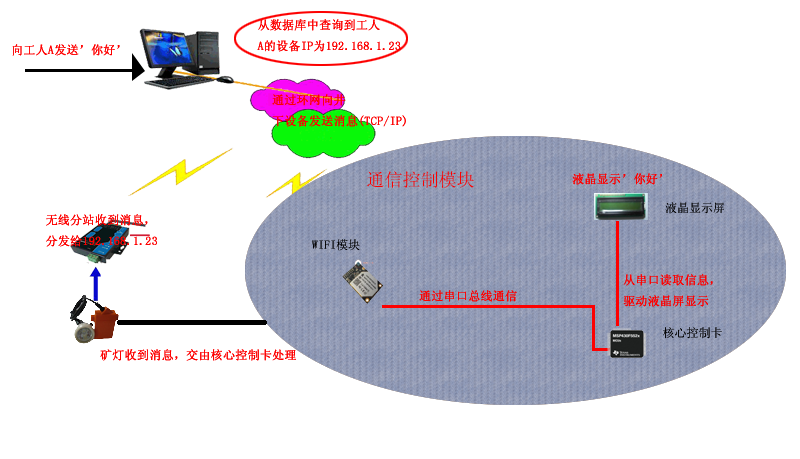
<style>
.page{position:relative;width:800px;height:459px;background:#ffffff}
.page>*{position:absolute;margin:0}
.t1{font:12px "SimSun";color:#fd0101;font-weight:bold}
.t2{font:12px "SimSun";color:#ff0000;font-weight:bold}
.t3{font:18px "SimSun";color:#fc0101}
.t4{font:12px "SimSun";color:#000000}
</style>
<div class="page">
<p class="t1" style="left:257px;top:19px;width:144px;height:33px">从数据库中查询到工人<br>A的设备IP为192.168.1.23</p>
<p class="t2" style="left:12px;top:44px;width:108px;height:12px">向工人A发送’你好’</p>
<p class="t1" style="left:272px;top:94px;width:134px;height:33px">通过环网向井<br>下设备发送消息(TCP/IP)</p>
<p class="t3" style="left:367px;top:171px;width:107px;height:17px">通信控制模块</p>
<p class="t1" style="left:572px;top:173px;width:90px;height:12px">液晶显示’你好’</p>
<p class="t4" style="left:665px;top:202px;width:59px;height:12px">液晶显示屏</p>
<p class="t1" style="left:46px;top:214px;width:111px;height:33px">无线分站收到消息，<br>分发给192.168.1.23</p>
<p class="t4" style="left:312px;top:239px;width:48px;height:12px">WIFI模块</p>
<p class="t1" style="left:623px;top:274px;width:90px;height:33px">从串口读取信息，<br>驱动液晶屏显示</p>
<p class="t1" style="left:419px;top:290px;width:98px;height:12px">通过串口总线通信</p>
<p class="t4" style="left:663px;top:327px;width:59px;height:12px">核心控制卡</p>
<p class="t1" style="left:100px;top:349px;width:196px;height:12px">矿灯收到消息，交由核心控制卡处理</p>
</div>
